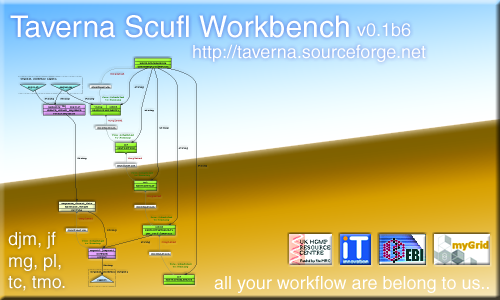
<style>
.page{position:relative;width:500px;height:300px}
.page>*{position:absolute;margin:0}
.t1{font:30px "Helvetica";color:#ffffff}
.t2{font:18px "Helvetica";color:#ffffff}
</style>
<div class="page">
<p class="t1" style="left:10px;top:15px;width:339px;height:23px">Taverna Scufl Workbench</p>
<p class="t2" style="left:357px;top:23px;width:54px;height:14px">v0.1b6</p>
<p class="t2" style="left:193px;top:44px;width:233px;height:18px">http://taverna.sourceforge.net</p>
<p class="t2" style="left:8px;top:231px;width:57px;height:60px">djm, jf<br>mg, pl,<br>tc, tmo.</p>
<p class="t2" style="left:214px;top:275px;width:275px;height:18px">all your workflow are belong to us..</p>
</div>
